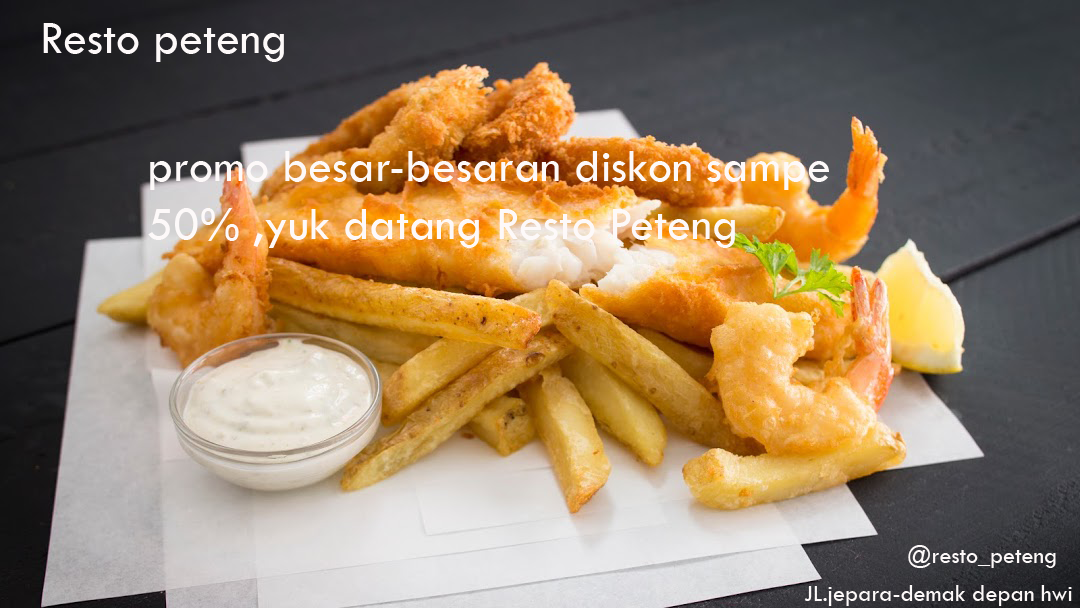
<style>
.page{position:relative;width:1080px;height:608px}
.page>*{position:absolute;margin:0}
.t1{font:48px "TwCenMT-Regular";color:#fdf9f9}
.t2{font:24px "TwCenMT-Regular";color:#fdf9f9}
</style>
<div class="page">
<p class="t1" style="left:43px;top:23px;width:241px;height:39px">Resto peteng</p>
<p class="t1" style="left:148px;top:151px;width:681px;height:97px">promo besar-besaran diskon sampe 50% ,yuk datang Resto Peteng</p>
<p class="t2" style="left:908px;top:545px;width:148px;height:23px">@resto_peteng</p>
<p class="t2" style="left:804px;top:585px;width:268px;height:21px">JL.jepara-demak depan hwi</p>
</div>
